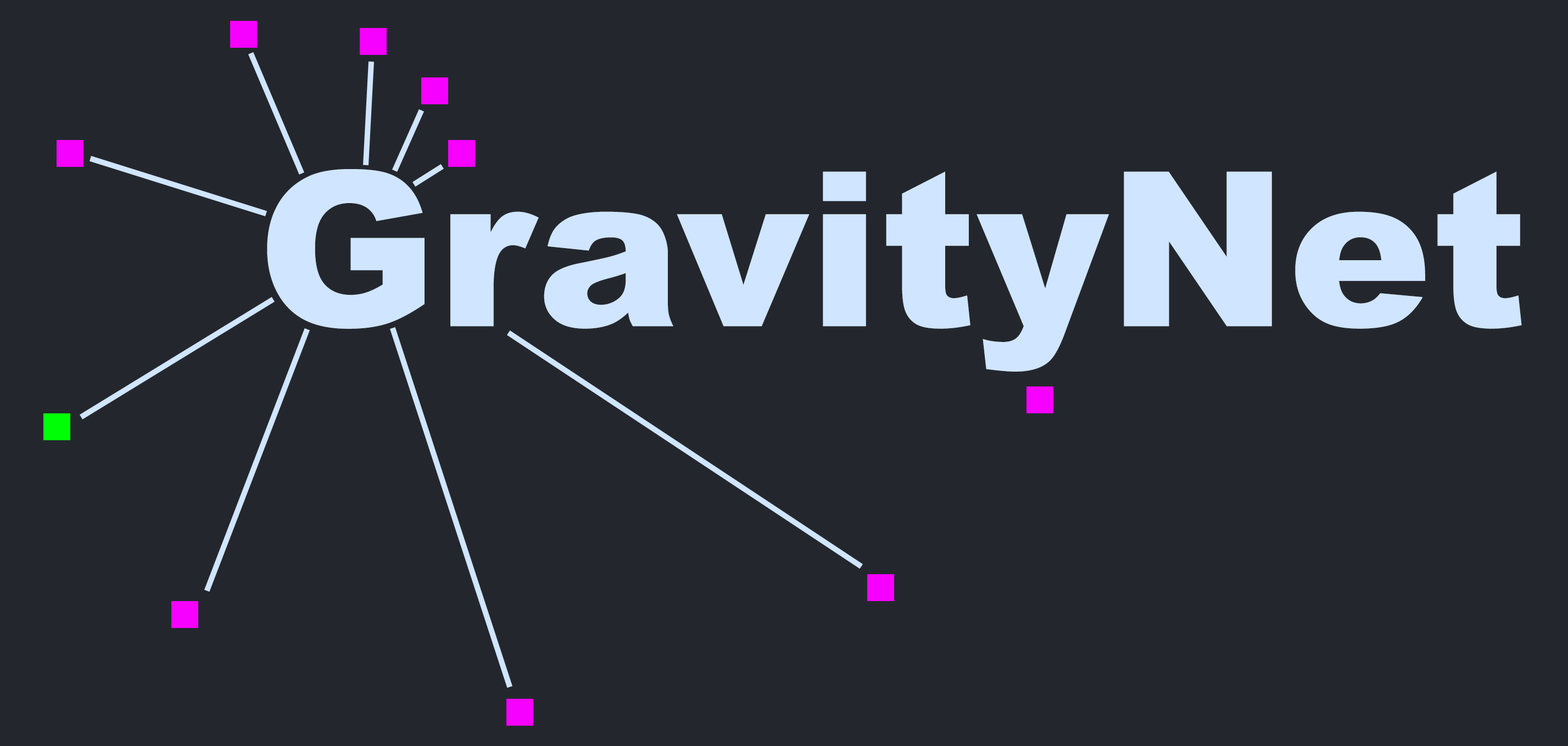
<style>
.page{position:relative;width:1568px;height:746px;background:#23272d}
.page>*{position:absolute;margin:0}
.t1{font:215.8px "Arial-Black";color:#d0e5ff}
</style>
<div class="page">
<p class="t1" style="left:267px;top:169px;width:1255px;height:203px">GravityNet</p>
</div>
